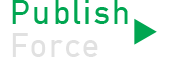
<style>
.page{position:relative;width:170px;height:58px;background:#ffffff}
.page>*{position:absolute;margin:0}
.t1{font:33.3px/33.3px "DINAlternate-Bold";letter-spacing:0.075em;color:#00a651}
.t2{font:33.3px/33.3px "DINAlternate-Bold";letter-spacing:0.075em;color:#e1e1e1}
</style>
<div class="page">
<p class="t1" style="left:12px;top:0px;width:116px;height:57px">Publish<br><span class="t2">Force</span></p>
</div>
